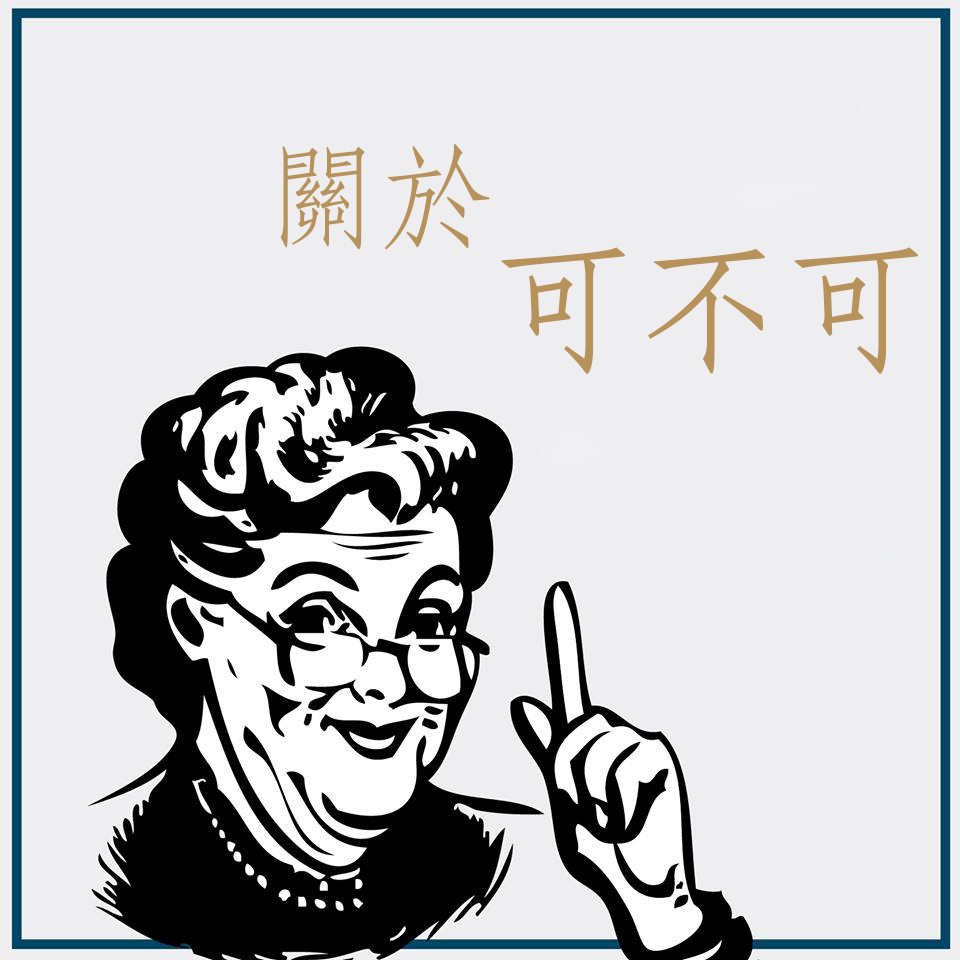
<style>
.page{position:relative;width:960px;height:960px;background:#eeeef0}
.page>*{position:absolute;margin:0}
.t1{font:112px "AdobeFangsongStd-Regular";color:#b7925a}
.t2{font:141.4px "AdobeFangsongStd-Regular";color:#b7925a;font-weight:bold}
</style>
<div class="page">
<p class="t1" style="left:280px;top:144px;width:210px;height:106px">關於</p>
<p class="t2" style="left:501px;top:247px;width:417px;height:127px">可不可</p>
</div>
